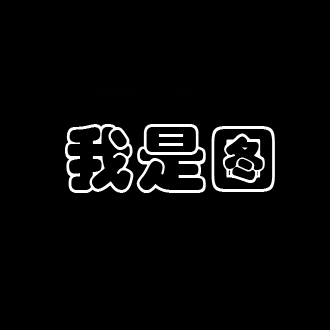
<style>
.page{position:relative;width:330px;height:330px;background:#000000}
.page>*{position:absolute;margin:0}
.t1{font:72px "STCaiyun";color:#ffffff}
</style>
<div class="page">
<p class="t1" style="left:65px;top:124px;width:210px;height:69px">我是图</p>
</div>
